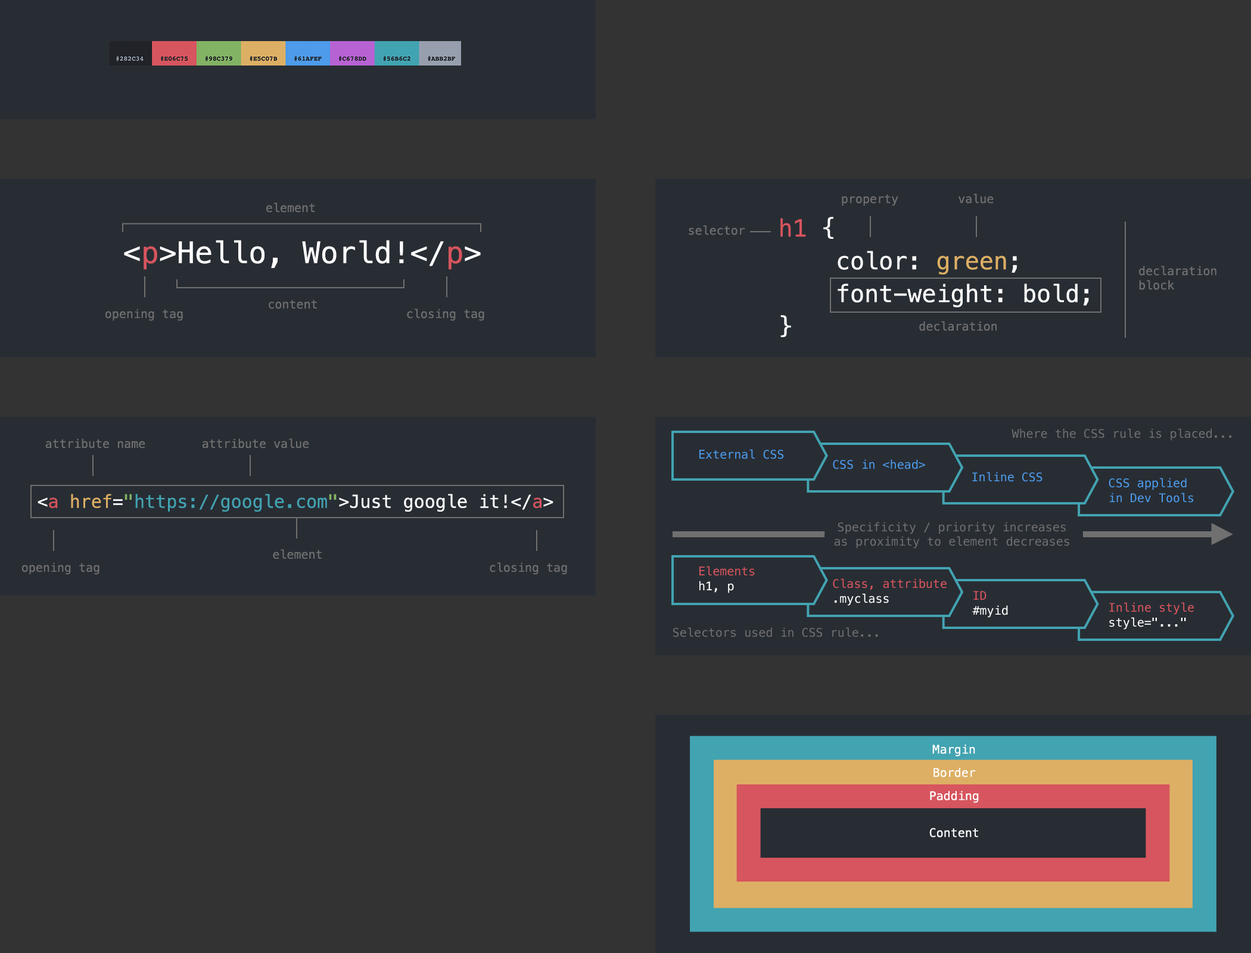
<style>
.page{position:relative;width:1251px;height:953px;background:#333333}
.page>*{position:absolute;margin:0}
.t1{font:11.9px "Menlo-Regular";color:#707070}
.t2{font:23.8px/32.8px "Menlo-Regular";color:#ffffff}
.t3{font:23.8px/32.8px "Menlo-Regular";color:#d7555e}
.t4{font:23.8px/32.8px "Menlo-Regular";color:#ddaf64}
.t5{font:29.8px "Menlo-Regular";color:#ffffff}
.t6{font:29.8px "Menlo-Regular";color:#d7555e}
.t7{font:11.9px "Menlo-Regular";color:#4d9bea}
.t8{font:11.9px/14.9px "Menlo-Regular";color:#4d9bea}
.t9{font:17.9px "Menlo-Regular";color:#42a3b2}
.t10{font:17.9px "Menlo-Regular";color:#ffffff}
.t11{font:17.9px "Menlo-Regular";color:#d7555e}
.t12{font:17.9px "Menlo-Regular";color:#ddaf64}
.t13{font:17.9px "Menlo-Regular";color:#82b363}
.t14{font:11.9px/14.9px "Menlo-Regular";color:#d7555e}
.t15{font:11.9px/14.9px "Menlo-Regular";color:#ffffff}
.t16{font:11.9px/23.2px "Menlo-Regular";color:#ffffff}
.t17{font:11.9px/13.7px "Menlo-Regular";color:#ffffff}
</style>
<div class="page">
<p class="t1" style="left:842px;top:194px;width:56px;height:12px">property</p>
<p class="t1" style="left:959px;top:194px;width:35px;height:10px">value</p>
<p class="t1" style="left:266px;top:203px;width:49px;height:10px">element</p>
<p class="t2" style="left:780px;top:217px;width:309px;height:120px"><span class="t3">h1</span> { <br>    color: <span class="t4">green</span>;<br>    font-weight: bold;<br>}</p>
<p class="t1" style="left:689px;top:225px;width:56px;height:10px">selector</p>
<p class="t5" style="left:124px;top:240px;width:357px;height:30px">&lt;<span class="t6">p</span>&gt;Hello, World!&lt;/<span class="t6">p</span>&gt;</p>
<p class="t1" style="left:1139px;top:266px;width:77px;height:24px">declaration block</p>
<p class="t1" style="left:269px;top:300px;width:48px;height:9px">content</p>
<p class="t1" style="left:105px;top:309px;width:78px;height:12px">opening tag</p>
<p class="t1" style="left:407px;top:309px;width:77px;height:12px">closing tag</p>
<p class="t1" style="left:919px;top:321px;width:78px;height:10px">declaration</p>
<p class="t1" style="left:1012px;top:428px;width:219px;height:13px">Where the CSS rule is placed...</p>
<p class="t1" style="left:45px;top:438px;width:100px;height:11px">attribute name</p>
<p class="t1" style="left:202px;top:438px;width:107px;height:11px">attribute value</p>
<p class="t7" style="left:699px;top:449px;width:84px;height:10px">External CSS</p>
<p class="t7" style="left:833px;top:459px;width:92px;height:10px">CSS in &lt;head&gt;</p>
<p class="t7" style="left:972px;top:472px;width:71px;height:10px">Inline CSS</p>
<p class="t8" style="left:1109px;top:478px;width:84px;height:25px">CSS applied in Dev Tools</p>
<p class="t9" style="left:38px;top:494px;width:515px;height:18px"><span class="t10">&lt;</span><span class="t11">a </span><span class="t12">href</span><span class="t10">=</span><span class="t13">"</span>https://google.com<span class="t13">"</span><span class="t10">&gt;Just google it!&lt;/</span><span class="t11">a</span><span class="t10">&gt;</span></p>
<p class="t1" style="left:834px;top:522px;width:235px;height:27px;text-align:center">Specificity / priority increases<br>as proximity to element decreases</p>
<p class="t1" style="left:273px;top:549px;width:49px;height:10px">element</p>
<p class="t1" style="left:22px;top:562px;width:77px;height:13px">opening tag</p>
<p class="t1" style="left:490px;top:562px;width:77px;height:13px">closing tag</p>
<p class="t14" style="left:699px;top:566px;width:56px;height:27px">Elements<br><span class="t15">h1, p</span></p>
<p class="t14" style="left:833px;top:578px;width:114px;height:28px">Class, attribute<br><span class="t15">.myclass</span></p>
<p class="t15" style="left:972px;top:591px;width:36px;height:27px"><span class="t14">ID<br></span>#myid</p>
<p class="t14" style="left:1109px;top:602px;width:85px;height:28px">Inline style<br><span class="t15">style="..."</span></p>
<p class="t1" style="left:673px;top:627px;width:205px;height:10px">Selectors used in CSS rule...</p>
<p class="t16" style="left:929px;top:745px;width:50px;height:93px;text-align:center">Margin<br>Border<br>Padding<br><br><span class="t17">Content</span></p>
</div>
